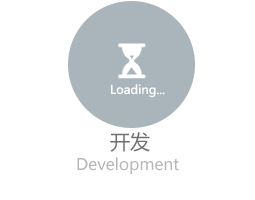
<style>
.page{position:relative;width:255px;height:200px;background:#ffffff}
.page>*{position:absolute;margin:0}
.t1{font:12px "MicrosoftYaHei";color:#ffffff}
.t2{font:20px "MicrosoftYaHei";color:#707070}
.t3{font:16px "MicrosoftYaHei";color:#b7b7b7}
</style>
<div class="page">
<p class="t1" style="left:111px;top:84px;width:54px;height:14px">Loading...</p>
<p class="t2" style="left:110px;top:132px;width:40px;height:20px">开发</p>
<p class="t3" style="left:77px;top:157px;width:102px;height:17px">Development</p>
</div>
